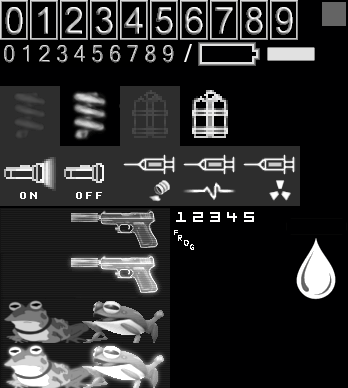
<style>
.page{position:relative;width:348px;height:388px;background:#000001}
.page>*{position:absolute;margin:0}
.t1{font:37.2px "ArialMT";scale:0.97 1}
.t2{font:23.5px "MicrosoftSansSerif";scale:0.91 1}
</style>
<div class="page">
<p class="t1" style="left:5px;top:7px;width:288px;height:28px">0 1 2 3 4 5 6 7 8 9</p>
<p class="t1" style="left:5px;top:7px;width:288px;height:28px">0 1 2 3 4 5 6 7 8 9</p>
<p class="t1" style="left:5px;top:7px;width:288px;height:28px">0 1 2 3 4 5 6 7 8 9</p>
<p class="t2" style="left:4px;top:45px;width:170px;height:18px">0 1 2 3 4 5 6 7 8 9</p>
<p class="t2" style="left:4px;top:45px;width:170px;height:18px">0 1 2 3 4 5 6 7 8 9</p>
<p class="t2" style="left:4px;top:45px;width:170px;height:18px">0 1 2 3 4 5 6 7 8 9</p>
</div>
